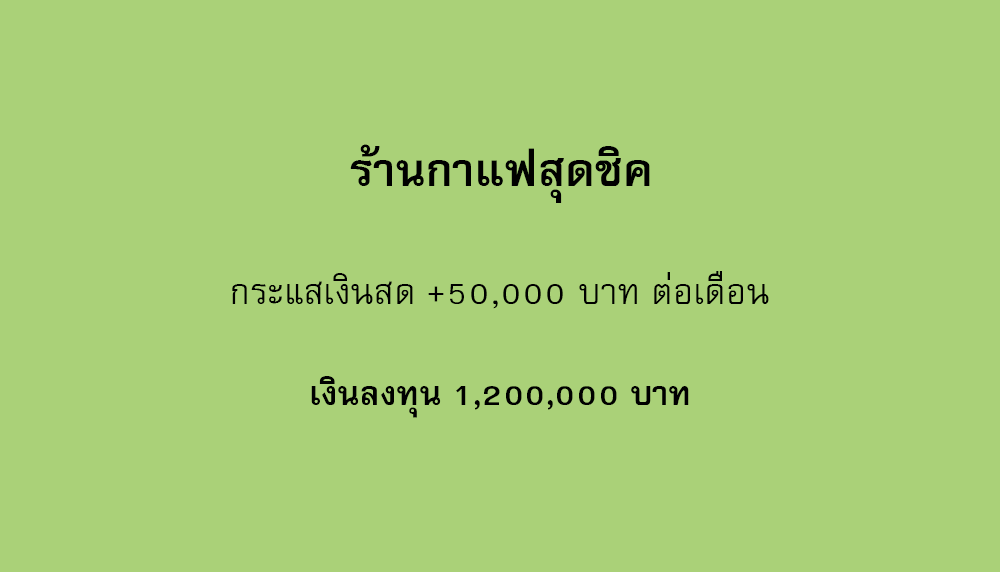
<style>
.page{position:relative;width:1000px;height:572px;background:#aad178}
.page>*{position:absolute;margin:0}
.t1{font:64px "FreesiaUPCBold";color:#000000}
.t2{font:50px "FreesiaUPC";color:#000000}
.t3{font:47px "FreesiaUPCBold";color:#000000}
</style>
<div class="page">
<p class="t1" style="left:350px;top:144px;width:300px;height:59px">ร้านกาแฟสุดชิค</p>
<p class="t2" style="left:232px;top:271px;width:537px;height:38px">กระแสเงินสด +50,000 บาท ต่อเดือน</p>
<p class="t3" style="left:311px;top:376px;width:378px;height:42px">เงินลงทุน 1,200,000 บาท</p>
</div>
